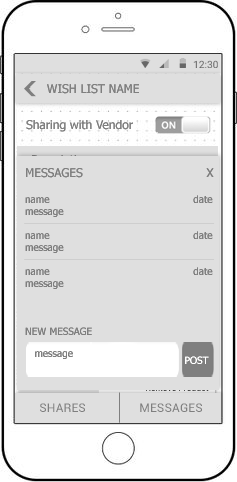
<style>
.page{position:relative;width:237px;height:482px;background:#dfdfdf}
.page>*{position:absolute;margin:0}
.t1{font:12px "Tahoma";color:#7f7f7f}
.t2{font:10px "Tahoma";color:#7f7f7f}
.t3{font:10px/22px "Tahoma";color:#7f7f7f}
.t4{font:10px/7px "Tahoma";color:#ffffff}
.t5{font:12.3px "Roboto-Regular";letter-spacing:0.005em;color:#7f7f7f}
</style>
<div class="page">
<p class="t1" style="left:47px;top:84px;width:92px;height:10px">WISH LIST NAME</p>
<p class="t1" style="left:26px;top:120px;width:107px;height:12px">Sharing with Vendor</p>
<p class="t2" style="left:25px;top:168px;width:189px;height:196px"><span class="t1">MESSAGES                                 X<br><br></span>name                                              date<br>message<br><br>name                                              date<br>message<br><br>name                                              date<br>message<br><br><br><br>NEW MESSAGE<br>   <span class="t3">message                                    <br></span><span class="t4">                                                   POST</span></p>
<p class="t5" style="left:40px;top:403px;width:162px;height:9px">SHARES                 MESSAGES</p>
</div>
